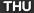
<style>
.page{position:relative;width:34px;height:13px}
.page>*{position:absolute;margin:0}
.t1{font:13.9px "K2D-ExtraBold";color:#ffffff}
</style>
<div class="page">
<p class="t1" style="left:3px;top:1px;width:28px;height:11px">THU</p>
</div>
